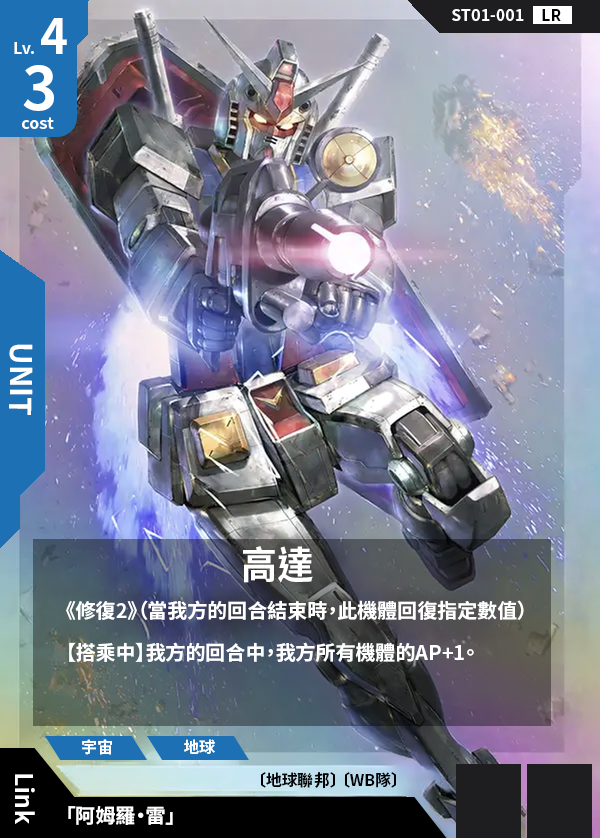
<style>
.page{position:relative;width:600px;height:838px}
.page>*{position:absolute;margin:0}
.t1{font:16px "NotoSansCJKtc-Bold";color:#ffffff}
.t2{font:16px "NotoSansCJKtc-Bold";color:#000000}
.t3{font:48px "NotoSansCJKtc-Bold";color:#ffffff}
.t4{font:60px "NotoSansCJKtc-Bold";color:#ffffff}
.t5{font:30px "NotoSansCJKtc-Bold";color:#ffffff}
.t6{font:38.4px "NotoSansCJKtc-Bold";color:#ffffff;scale:0.94 1}
.t7{font:20px "NotoSansCJKtc-Bold";color:#ffffff}
.t8{font:24px "NotoSansCJKtc-Bold";color:#ffffff}
</style>
<div class="page">
<p class="t1" style="left:452px;top:9px;width:72px;height:12px">ST01-001</p>
<p class="t2" style="left:542px;top:9px;width:19px;height:12px">LR</p>
<p class="t3" style="left:41px;top:18px;width:26px;height:36px">4</p>
<p class="t1" style="left:14px;top:42px;width:20px;height:12px">Lv.</p>
<p class="t4" style="left:23px;top:65px;width:31px;height:46px">3</p>
<p class="t1" style="left:22px;top:117px;width:32px;height:12px">cost</p>
<p class="t5" style="left:9px;top:344px;width:24px;height:71px;rotate:90deg">UNIT</p>
<p class="t6" style="left:243px;top:546px;width:70px;height:37px">高達</p>
<p class="t7" style="left:66px;top:600px;width:458px;height:20px">《修復2》（當我方的回合結束時，此機體回復指定數值）</p>
<p class="t7" style="left:69px;top:642px;width:405px;height:20px">【搭乘中】我方的回合中，我方所有機體的AP+1。</p>
<p class="t1" style="left:82px;top:739px;width:30px;height:16px">宇宙</p>
<p class="t1" style="left:184px;top:739px;width:31px;height:15px">地球</p>
<p class="t8" style="left:15px;top:774px;width:20px;height:50px;rotate:90deg">Link</p>
<p class="t2" style="left:261px;top:772px;width:135px;height:16px">〔地球聯邦〕 〔WB隊〕</p>
<p class="t7" style="left:68px;top:806px;width:105px;height:19px">「阿姆羅・雷」</p>
</div>
